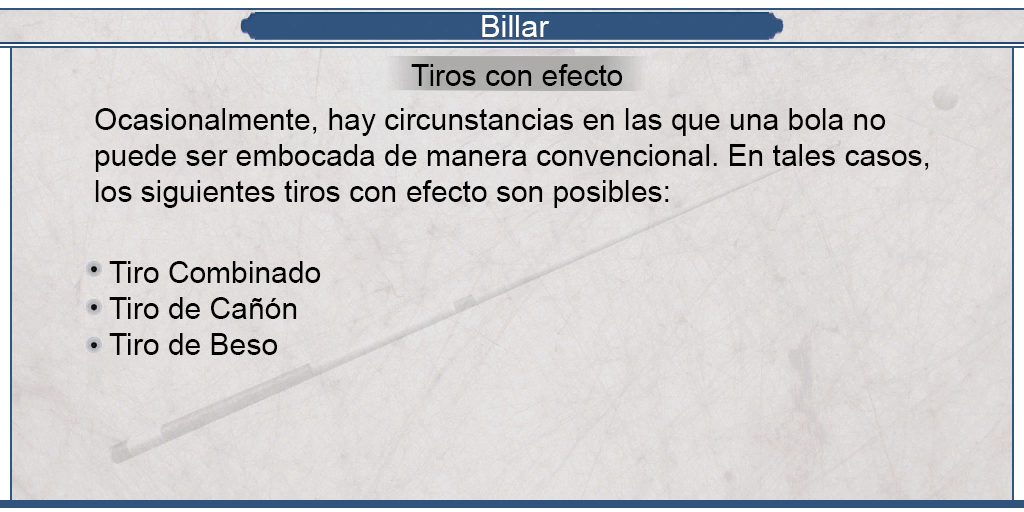
<style>
.page{position:relative;width:1024px;height:512px}
.page>*{position:absolute;margin:0}
.t1{font:30.8px "ArialMT";color:#ffffff}
.t2{font:30px "ArialMT";color:#000000}
</style>
<div class="page">
<p class="t1" style="left:482px;top:15px;width:68px;height:22px">Billar</p>
<p class="t2" style="left:411px;top:64px;width:212px;height:22px">Tiros con efecto</p>
<p class="t2" style="left:95px;top:108px;width:834px;height:100px;text-align:justify">Ocasionalmente, hay circunstancias en las que una bola no<br>puede ser embocada de manera convencional. En tales casos,<br>los siguientes tiros con efecto son posibles:</p>
<p class="t2" style="left:109px;top:261px;width:212px;height:94px;text-align:justify">Tiro Combinado<br>Tiro de Cañón<br>Tiro de Beso</p>
</div>
